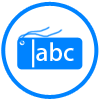
<style>
.page{position:relative;width:100px;height:100px;background:#ffffff}
.page>*{position:absolute;margin:0}
.t1{font:23.8px "AdobeHeitiStd-Regular";color:#ffffff}
</style>
<div class="page">
<p class="t1" style="left:36px;top:42px;width:38px;height:19px">abc</p>
</div>
